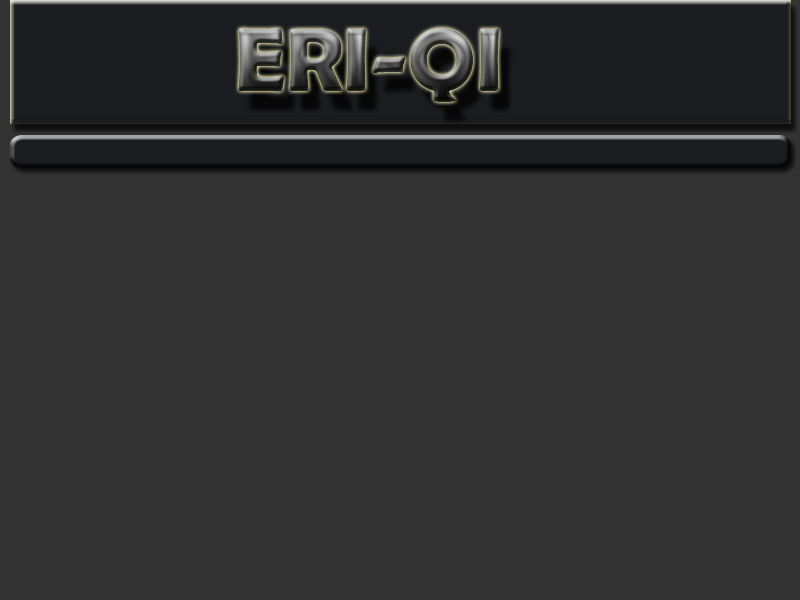
<style>
.page{position:relative;width:800px;height:600px;background:#333333}
.page>*{position:absolute;margin:0}
.t1{font:90px "BerlinSansFBDemi-Bold"}
</style>
<div class="page">
<p class="t1" style="left:238px;top:28px;width:261px;height:74px">ERI-QI</p>
</div>
